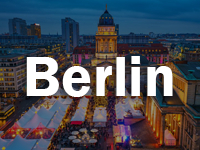
<style>
.page{position:relative;width:200px;height:150px}
.page>*{position:absolute;margin:0}
.t1{font:58.3px "FranklinGothic-Demi";color:#ffffff}
</style>
<div class="page">
<p class="t1" style="left:26px;top:56px;width:147px;height:41px">Berlin</p>
</div>
